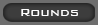
<style>
.page{position:relative;width:98px;height:25px;background:#6e6e6e}
.page>*{position:absolute;margin:0}
.t1{font:14px "BankGothicBT-Medium";color:#ffffff}
</style>
<div class="page">
<p class="t1" style="left:21px;top:9px;width:57px;height:7px">Rounds</p>
</div>
